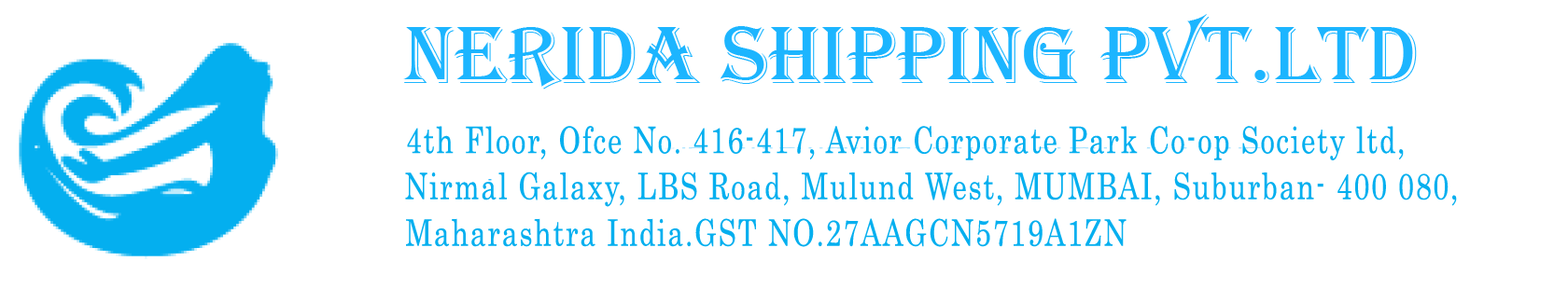
<style>
.page{position:relative;width:1568px;height:289px;background:#ffffff}
.page>*{position:absolute;margin:0}
.t1{font:36.6px "Century";letter-spacing:0.06em;color:#04afef;scale:0.77 1}
</style>
<div class="page">
<p class="t1" style="left:407px;top:126px;width:997px;height:35px">4th Floor, Ofce No. 416-417, Avior Corporate Park Co-op Society ltd,</p>
<p class="t1" style="left:405px;top:172px;width:1052px;height:35px">Nirmal Galaxy, LBS Road, Mulund West, MUMBAI, Suburban- 400 080,</p>
<p class="t1" style="left:406px;top:218px;width:721px;height:29px">Maharashtra India.GST NO.27AAGCN5719A1ZN</p>
</div>
